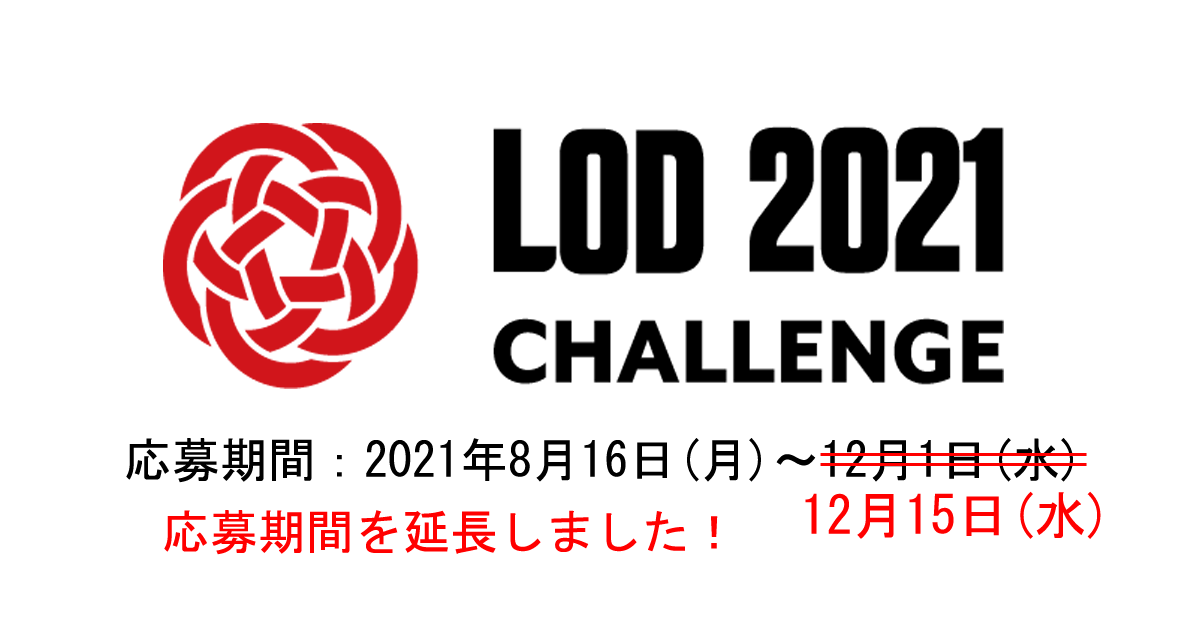
<style>
.page{position:relative;width:1200px;height:630px;background:#ffffff}
.page>*{position:absolute;margin:0}
.t1{font:48px "MS-Gothic";color:#000000}
.t2{font:52px "MS-Gothic";color:#ff0000}
.t3{font:48px "MS-Gothic";color:#ff0000}
</style>
<div class="page">
<p class="t1" style="left:126px;top:438px;width:947px;height:45px">応募期間：2021年8月16日(月)～12月1日(水)</p>
<p class="t2" style="left:805px;top:491px;width:296px;height:48px">12月15日(水)</p>
<p class="t3" style="left:164px;top:510px;width:554px;height:45px">応募期間を延長しました！</p>
</div>
